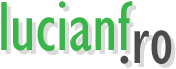
<style>
.page{position:relative;width:176px;height:69px;background:#ffffff}
.page>*{position:absolute;margin:0}
.t1{font:71.7px "GillSansMT-Condensed";color:#39b54a}
.t2{font:71.7px "GillSansMT-Condensed";color:#4b4b4b}
</style>
<div class="page">
<p class="t1" style="left:1px;top:1px;width:132px;height:50px">lucianf</p>
<p class="t2" style="left:120px;top:30px;width:52px;height:34px">.ro</p>
</div>
